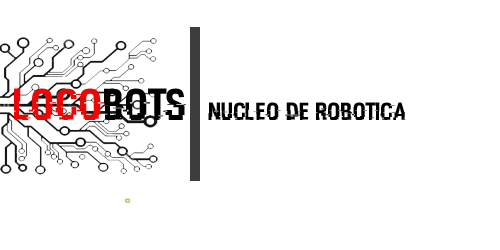
<style>
.page{position:relative;width:500px;height:250px;background:#ffffff}
.page>*{position:absolute;margin:0}
.t1{font:25px "HACKED";color:#010101}
.t2{font:45px "HACKED";color:#ef0303}
.t3{font:45px "HACKED";color:#010101}
</style>
<div class="page">
<p class="t1" style="left:14px;top:88px;width:392px;height:32px"><span class="t2">LOCO</span><span class="t3">BoTS  </span>Nucleo de Robotica</p>
</div>
